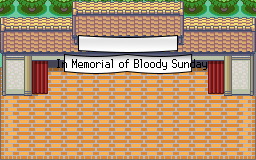
<style>
.page{position:relative;width:256px;height:160px;background:#e08830}
.page>*{position:absolute;margin:0}
.t1{font:16px "PokemonDPPt";color:#000000}
</style>
<div class="page">
<p class="t1" style="left:57px;top:59px;width:150px;height:11px">In Memorial of Bloody Sunday</p>
</div>
